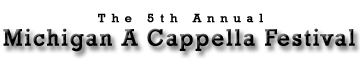
<style>
.page{position:relative;width:360px;height:65px;background:#ffffff}
.page>*{position:absolute;margin:0}
.t1{font:12px "Rockwell";letter-spacing:0.5em;color:#000000;font-weight:bold}
.t2{font:24.2px "Rockwell";letter-spacing:0.07em;color:#000000;font-weight:bold;scale:0.91 1}
</style>
<div class="page">
<p class="t1" style="left:98px;top:13px;width:165px;height:10px">The 5th Annual</p>
<p class="t2" style="left:3px;top:28px;width:352px;height:24px">Michigan A Cappella Festival</p>
</div>
